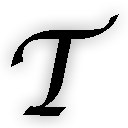
<style>
.page{position:relative;width:128px;height:128px;background:#ffffff}
.page>*{position:absolute;margin:0}
.t1{font:117.9px "LucidaCalligraphy-Italic";color:#000000}
</style>
<div class="page">
<p class="t1" style="left:11px;top:14px;width:108px;height:102px">T</p>
</div>
